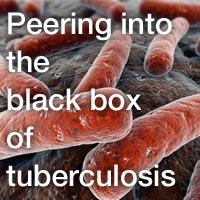
<style>
.page{position:relative;width:200px;height:200px}
.page>*{position:absolute;margin:0}
.t1{font:30px/38.1px "HelveticaNeue-Medium";color:#ffffff}
</style>
<div class="page">
<p class="t1" style="left:6px;top:12px;width:170px;height:175px">Peering into <br>the<br>black box <br>of<br>tuberculosis</p>
</div>
